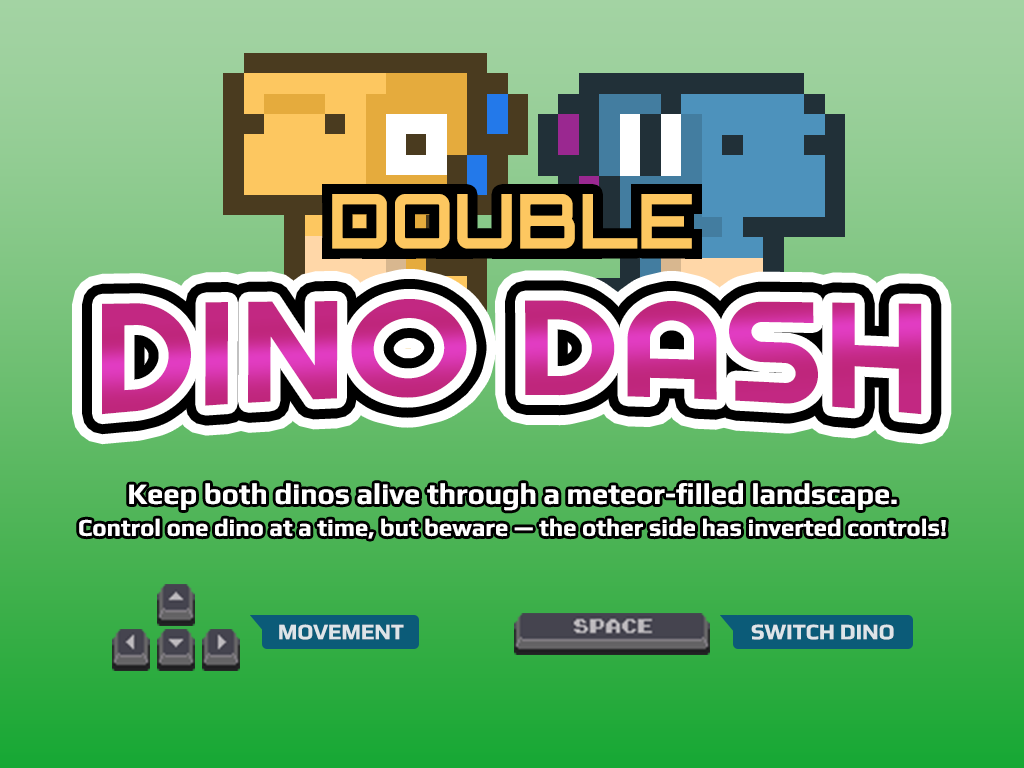
<style>
.page{position:relative;width:1024px;height:768px}
.page>*{position:absolute;margin:0}
.t1{font:75.4px "Orbitron-Bold";color:#fdc760}
.t2{font:158.4px "Righteous-Regular";color:#c22882}
.t3{font:24px/32px "Play-Bold";color:#ffffff}
.t4{font:29px/32px "Play-Bold";color:#ffffff}
.t5{font:22px "Play-Bold";color:#dee4e8}
</style>
<div class="page">
<p class="t1" style="left:332px;top:194px;width:360px;height:55px">DOUBLE</p>
<p class="t2" style="left:102px;top:299px;width:820px;height:116px">DINO DASH</p>
<p class="t3" style="left:79px;top:483px;width:867px;height:56px;text-align:center"><span class="t4">Keep both dinos alive through a meteor-filled landscape.<br></span>Control one dino at a time, but beware — the other side has inverted controls!</p>
<p class="t5" style="left:279px;top:624px;width:125px;height:16px">MOVEMENT</p>
<p class="t5" style="left:751px;top:624px;width:143px;height:16px">SWITCH DINO</p>
</div>
